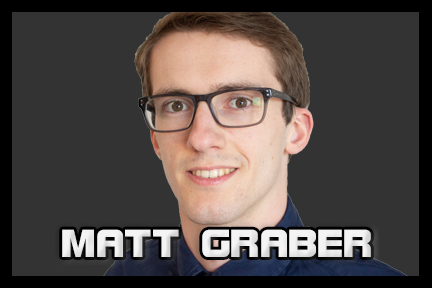
<style>
.page{position:relative;width:432px;height:288px;background:#333333}
.page>*{position:absolute;margin:0}
.t1{font:41.7px "BolsterBold";color:#f3f3f3}
</style>
<div class="page">
<p class="t1" style="left:62px;top:229px;width:309px;height:28px">MATT GRABER</p>
</div>
